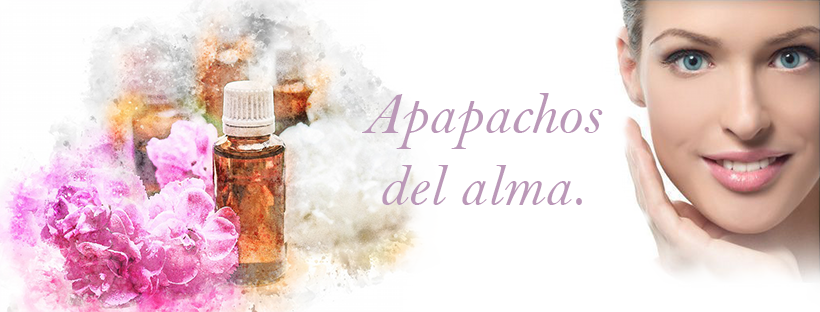
<style>
.page{position:relative;width:820px;height:312px;background:#ffffff}
.page>*{position:absolute;margin:0}
.t1{font:60px "BellMTItalic";color:#bc99b8}
</style>
<div class="page">
<p class="t1" style="left:362px;top:93px;width:241px;height:112px;text-align:center">Apapachos del alma.</p>
</div>
